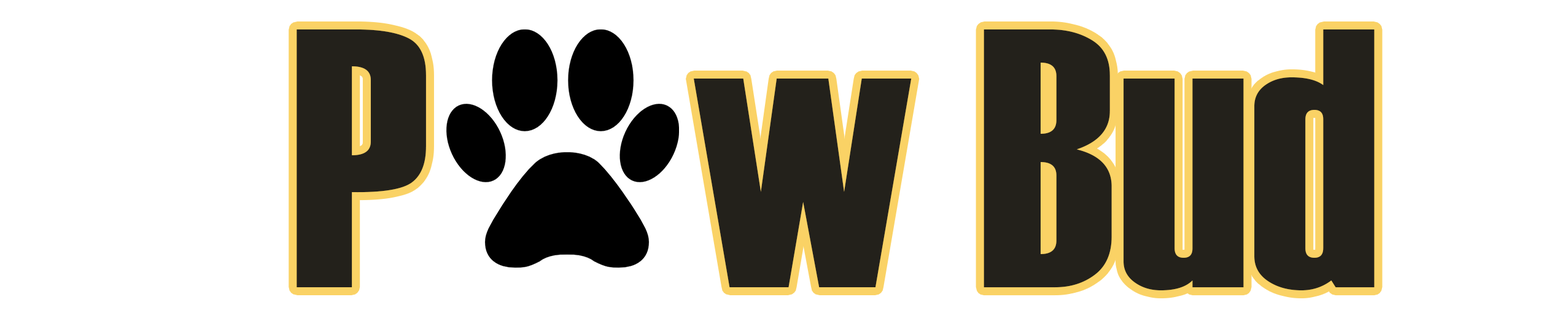
<style>
.page{position:relative;width:1568px;height:321px;background:#ffffff}
.page>*{position:absolute;margin:0}
.t1{font:368.4px "Haettenschweiler";color:#23211b}
</style>
<div class="page">
<p class="t1" style="left:297px;top:29px;width:1078px;height:261px">P    w Bud</p>
</div>
